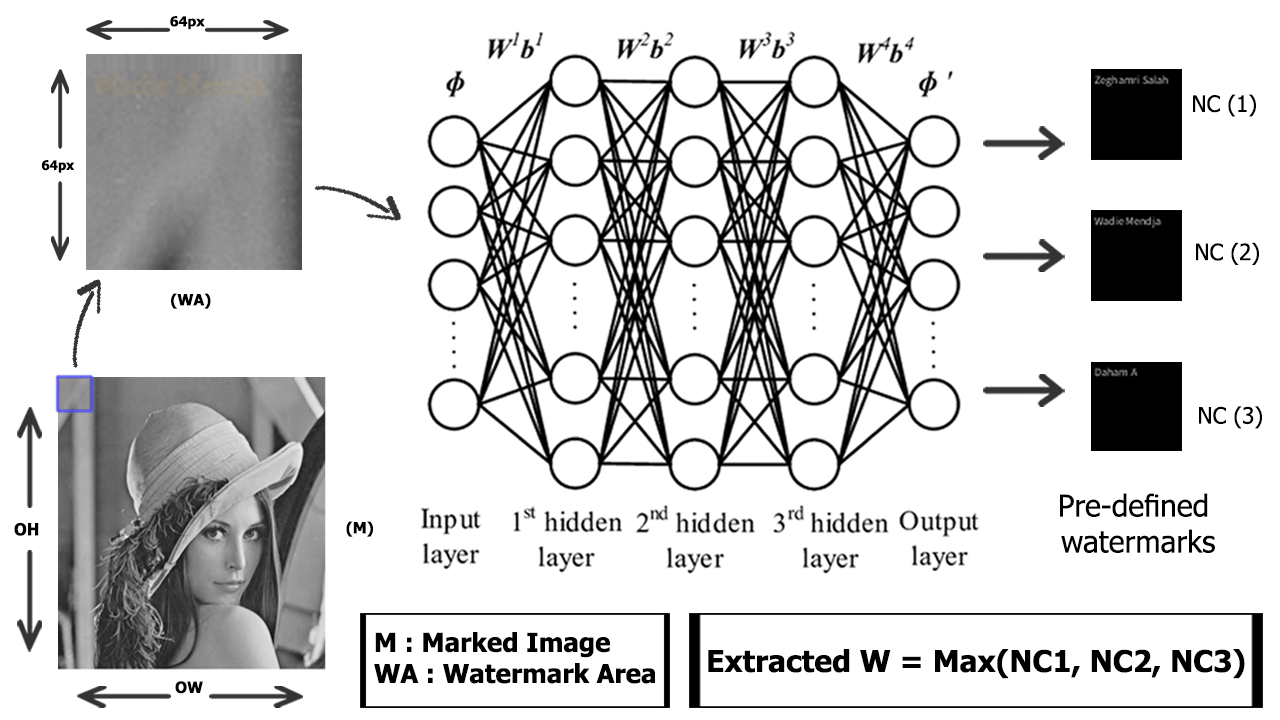
<style>
.page{position:relative;width:1280px;height:720px;background:#ffffff}
.page>*{position:absolute;margin:0}
.t1{font:13.7px "Tahoma-Bold";color:#000000}
.t2{font:22.7px "Tahoma";color:#000000}
.t3{font:13.2px "Tahoma-Bold";color:#000000}
.t4{font:15.7px "Tahoma-Bold";color:#000000}
.t5{font:30px "Tahoma";color:#000000}
.t6{font:16.8px "Tahoma-Bold";color:#000000}
.t7{font:26px "Tahoma-Bold";color:#000000}
.t8{font:30px "Tahoma-Bold";color:#000000}
</style>
<div class="page">
<p class="t1" style="left:170px;top:16px;width:35px;height:14px">64px</p>
<p class="t2" style="left:1193px;top:94px;width:63px;height:23px">NC (1)</p>
<p class="t3" style="left:41px;top:160px;width:34px;height:13px">64px</p>
<p class="t2" style="left:1196px;top:242px;width:63px;height:23px">NC (2)</p>
<p class="t4" style="left:171px;top:293px;width:40px;height:16px">(WA)</p>
<p class="t2" style="left:1199px;top:406px;width:63px;height:23px">NC (3)</p>
<p class="t5" style="left:1060px;top:493px;width:155px;height:60px;text-align:center">Pre-defined <br>watermarks</p>
<p class="t4" style="left:346px;top:521px;width:27px;height:16px">(M)</p>
<p class="t6" style="left:14px;top:522px;width:25px;height:14px">OH</p>
<p class="t7" style="left:374px;top:632px;width:281px;height:52px">M : Marked Image<br>WA : Watermark Area</p>
<p class="t8" style="left:708px;top:649px;width:537px;height:30px">Extracted W = Max(NC1, NC2, NC3)</p>
<p class="t4" style="left:175px;top:681px;width:28px;height:13px">OW</p>
</div>
